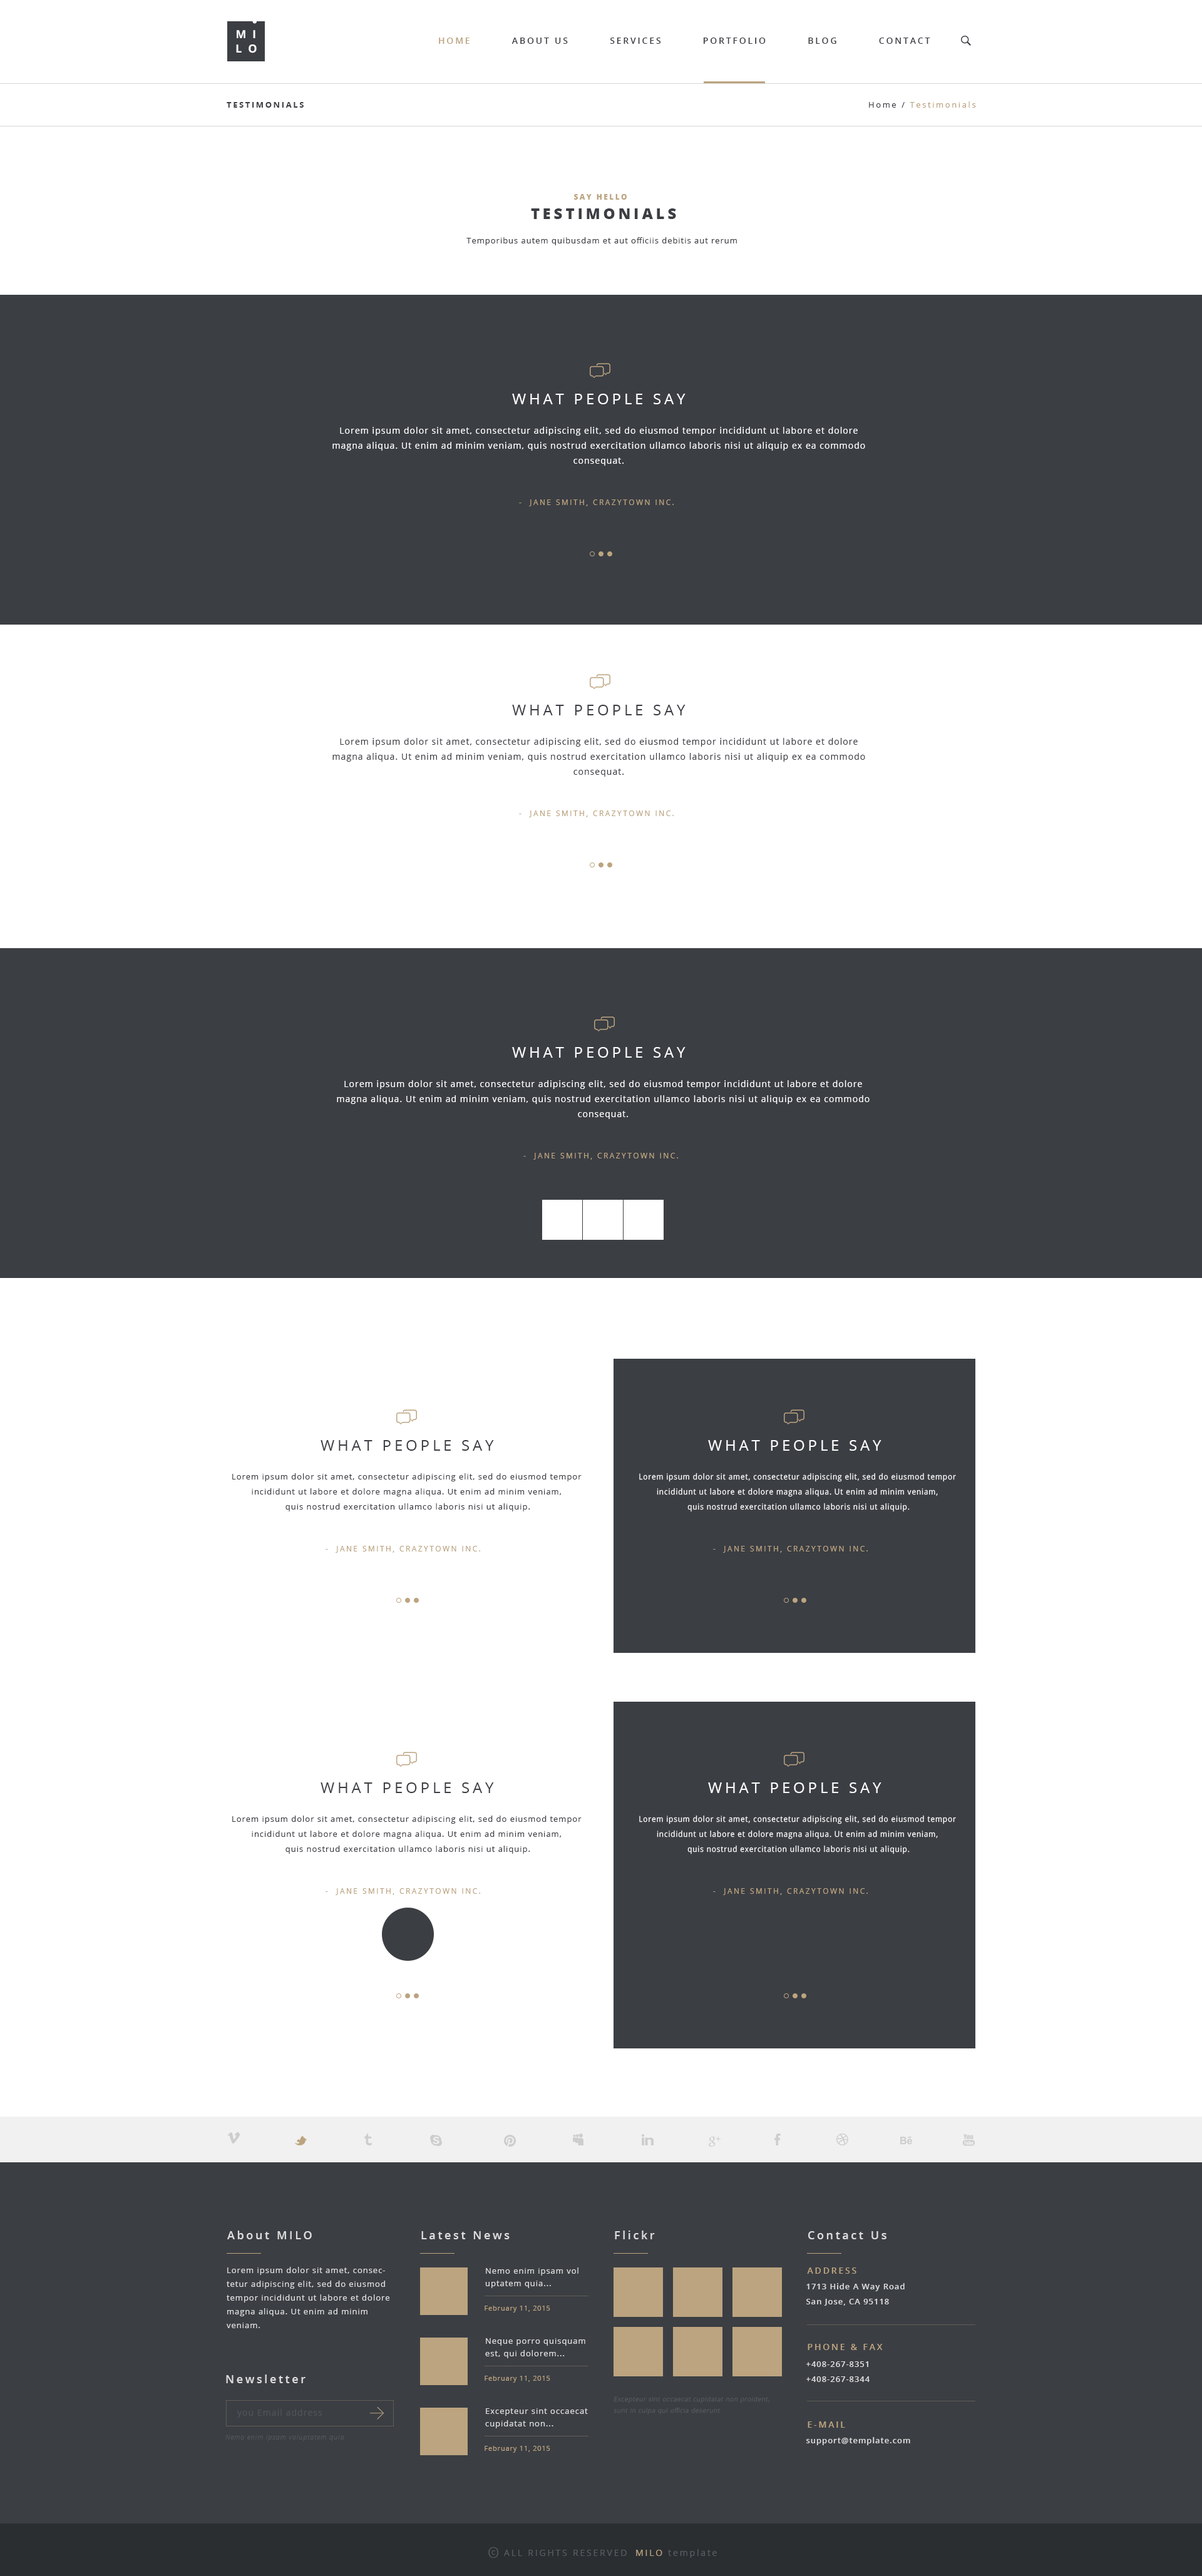
<style>
.page{position:relative;width:1202px;height:2576px;background:#ffffff}
.page>*{position:absolute;margin:0}
.t1{font:11.3px "OpenSans-Bold";letter-spacing:0.55em;color:#ffffff;text-transform:uppercase}
.t2{font:8.8px "OpenSans-Semibold";letter-spacing:0.2em;color:#3b3e43;text-transform:uppercase}
.t3{font:8.8px "OpenSans-Semibold";letter-spacing:0.2em;color:#bca480;text-transform:uppercase}
.t4{font:8.1px "OpenSans";letter-spacing:0.2em;color:#bca480}
.t5{font:8.1px "OpenSans";letter-spacing:0.2em;color:#3b3e43}
.t6{font:8.1px "OpenSans-Bold";letter-spacing:0.2em;color:#3b3e43;text-transform:uppercase}
.t7{font:7.5px "OpenSans-Extrabold";letter-spacing:0.2em;color:#bca480;text-transform:uppercase}
.t8{font:15px "OpenSans-Extrabold";letter-spacing:0.2em;color:#3b3e43;text-transform:uppercase}
.t9{font:8.1px "OpenSans";letter-spacing:0.075em;color:#3b3e43}
.t10{font:15px "OpenSans";letter-spacing:0.2em;color:#ffffff;text-transform:uppercase}
.t11{font:8.8px/15px "OpenSans";letter-spacing:0.075em;color:#ffffff}
.t12{font:7.5px "OpenSans";letter-spacing:0.2em;color:#bca480;text-transform:uppercase}
.t13{font:15px "OpenSans";letter-spacing:0.2em;color:#3b3e43;text-transform:uppercase}
.t14{font:8.8px/15px "OpenSans";letter-spacing:0.075em;color:#3b3e43}
.t15{font:8.1px/15px "OpenSans";letter-spacing:0.075em;color:#3b3e43}
.t16{font:8.1px/15px "OpenSans";letter-spacing:0.075em;color:#ffffff;scale:0.91 1}
.t17{font:11.3px "OpenSans-Semibold";letter-spacing:0.2em;color:#dddddd}
.t18{font:8.1px/13.8px "OpenSans";letter-spacing:0.075em;color:#dddddd}
.t19{font:8.1px/12.5px "OpenSans";letter-spacing:0.075em;color:#dddddd}
.t20{font:8.1px/15px "OpenSans-Semibold";letter-spacing:0.075em;color:#dddddd}
.t21{font:6.9px "OpenSans";letter-spacing:0.075em;color:#bca480}
.t22{font:6.3px/11.3px "OpenSans-Light";letter-spacing:0.075em;color:#585c62;font-style:italic}
.t23{font:8.8px "OpenSans";letter-spacing:0.075em;color:#505459}
.t24{font:6.9px "OpenSansLight-Italic";letter-spacing:0.075em;color:#53575d}
.t25{font:8.1px "OpenSans-Semibold";letter-spacing:0.075em;color:#dddddd}
.t26{font:15px "OpenSans-Light";letter-spacing:0.2em;color:#585c62;text-transform:uppercase}
.t27{font:8.8px "OpenSans";letter-spacing:0.2em;color:#585c62;text-transform:uppercase}
.t28{font:8.8px "OpenSans";letter-spacing:0.2em;color:#585c62}
.t29{font:8.8px "OpenSans";letter-spacing:0.2em;color:#bca480;text-transform:uppercase}
.t30{font:6.3px "OpenSans";letter-spacing:0.2em;color:#585c62;text-transform:uppercase}
</style>
<div class="page">
<p class="t1" style="left:237px;top:30px;width:18px;height:8px">mi</p>
<p class="t2" style="left:439px;top:38px;width:491px;height:6px"><span class="t3">Home          </span>About Us          Services          Portfolio          Blog          Contact</p>
<p class="t1" style="left:236px;top:44px;width:21px;height:9px">lo</p>
<p class="t4" style="left:869px;top:101px;width:107px;height:7px"><span class="t5">Home / </span>Testimonials</p>
<p class="t6" style="left:227px;top:102px;width:77px;height:6px">testimonials</p>
<p class="t7" style="left:574px;top:194px;width:52px;height:6px">say hello</p>
<p class="t8" style="left:531px;top:208px;width:145px;height:11px">testimonials</p>
<p class="t9" style="left:466px;top:237px;width:271px;height:8px">Temporibus autem quibusdam et aut officiis debitis aut rerum</p>
<p class="t10" style="left:512px;top:394px;width:173px;height:10px">What people say</p>
<p class="t11" style="left:332px;top:427px;width:533px;height:39px;text-align:center">Lorem ipsum dolor sit amet, consectetur adipiscing elit, sed do eiusmod tempor incididunt ut labore et dolore magna aliqua. Ut enim ad minim veniam, quis nostrud exercitation ullamco laboris nisi ut aliquip ex ea commodo consequat.</p>
<p class="t12" style="left:519px;top:499px;width:154px;height:7px">-  jane smith, crazytown inc.</p>
<p class="t13" style="left:512px;top:705px;width:173px;height:10px">What people say</p>
<p class="t14" style="left:332px;top:738px;width:533px;height:39px;text-align:center">Lorem ipsum dolor sit amet, consectetur adipiscing elit, sed do eiusmod tempor incididunt ut labore et dolore magna aliqua. Ut enim ad minim veniam, quis nostrud exercitation ullamco laboris nisi ut aliquip ex ea commodo consequat.</p>
<p class="t12" style="left:519px;top:810px;width:154px;height:7px">-  jane smith, crazytown inc.</p>
<p class="t10" style="left:512px;top:1047px;width:173px;height:11px">What people say</p>
<p class="t11" style="left:337px;top:1080px;width:532px;height:39px;text-align:center">Lorem ipsum dolor sit amet, consectetur adipiscing elit, sed do eiusmod tempor incididunt ut labore et dolore magna aliqua. Ut enim ad minim veniam, quis nostrud exercitation ullamco laboris nisi ut aliquip ex ea commodo consequat.</p>
<p class="t12" style="left:523px;top:1153px;width:155px;height:7px">-  jane smith, crazytown inc.</p>
<p class="t13" style="left:320px;top:1440px;width:174px;height:11px">What people say</p>
<p class="t10" style="left:708px;top:1440px;width:173px;height:11px">What people say</p>
<p class="t15" style="left:232px;top:1473px;width:349px;height:38px;text-align:center">Lorem ipsum dolor sit amet, consectetur adipiscing elit, sed do eiusmod tempor incididunt ut labore et dolore magna aliqua. Ut enim ad minim veniam,<br> quis nostrud exercitation ullamco laboris nisi ut aliquip.</p>
<p class="t16" style="left:639px;top:1473px;width:317px;height:39px;text-align:center">Lorem ipsum dolor sit amet, consectetur adipiscing elit, sed do eiusmod tempor incididunt ut labore et dolore magna aliqua. Ut enim ad minim veniam,<br> quis nostrud exercitation ullamco laboris nisi ut aliquip.</p>
<p class="t12" style="left:325px;top:1546px;width:155px;height:7px">-  jane smith, crazytown inc.</p>
<p class="t12" style="left:713px;top:1546px;width:154px;height:7px">-  jane smith, crazytown inc.</p>
<p class="t13" style="left:320px;top:1782px;width:174px;height:11px">What people say</p>
<p class="t10" style="left:708px;top:1782px;width:173px;height:11px">What people say</p>
<p class="t15" style="left:232px;top:1816px;width:349px;height:38px;text-align:center">Lorem ipsum dolor sit amet, consectetur adipiscing elit, sed do eiusmod tempor incididunt ut labore et dolore magna aliqua. Ut enim ad minim veniam,<br> quis nostrud exercitation ullamco laboris nisi ut aliquip.</p>
<p class="t16" style="left:639px;top:1815px;width:317px;height:39px;text-align:center">Lorem ipsum dolor sit amet, consectetur adipiscing elit, sed do eiusmod tempor incididunt ut labore et dolore magna aliqua. Ut enim ad minim veniam,<br> quis nostrud exercitation ullamco laboris nisi ut aliquip.</p>
<p class="t12" style="left:325px;top:1888px;width:155px;height:7px">-  jane smith, crazytown inc.</p>
<p class="t12" style="left:713px;top:1888px;width:154px;height:7px">-  jane smith, crazytown inc.</p>
<p class="t17" style="left:227px;top:2231px;width:85px;height:8px">About MILO</p>
<p class="t17" style="left:421px;top:2231px;width:88px;height:8px">Latest News</p>
<p class="t17" style="left:615px;top:2231px;width:40px;height:8px">Flickr</p>
<p class="t17" style="left:807px;top:2231px;width:79px;height:8px">Contact Us</p>
<p class="t18" style="left:227px;top:2267px;width:162px;height:61px">Lorem ipsum dolor sit amet, consectetur adipiscing elit, sed do eiusmod tempor incididunt ut labore et dolore magna aliqua. Ut enim ad minim veniam.</p>
<p class="t19" style="left:485px;top:2267px;width:93px;height:21px">Nemo enim ipsam vol uptatem quia...</p>
<p class="t3" style="left:807px;top:2267px;width:49px;height:7px">Address</p>
<p class="t20" style="left:806px;top:2283px;width:98px;height:23px">1713 Hide A Way Road<br>San Jose, CA 95118</p>
<p class="t21" style="left:484px;top:2306px;width:66px;height:7px">February 11, 2015</p>
<p class="t19" style="left:485px;top:2338px;width:100px;height:20px">Neque porro quisquam est, qui dolorem...</p>
<p class="t3" style="left:807px;top:2344px;width:75px;height:6px">Phone &amp; Fax</p>
<p class="t20" style="left:806px;top:2361px;width:63px;height:21px">+408-267-8351<br>+408-267-8344</p>
<p class="t17" style="left:226px;top:2374px;width:79px;height:9px">Newsletter</p>
<p class="t21" style="left:484px;top:2376px;width:66px;height:7px">February 11, 2015</p>
<p class="t22" style="left:613px;top:2396px;width:156px;height:19px">Excepteur sint occaecat cupidatat non proident, sunt in culpa qui officia deserunt</p>
<p class="t23" style="left:237px;top:2409px;width:85px;height:9px">you Email address</p>
<p class="t19" style="left:485px;top:2408px;width:103px;height:20px">Excepteur sint occaecat cupidatat non...</p>
<p class="t3" style="left:807px;top:2421px;width:38px;height:7px">E-mail</p>
<p class="t24" style="left:225px;top:2435px;width:119px;height:6px">Nemo enim ipsam voluptatem quia</p>
<p class="t25" style="left:806px;top:2437px;width:104px;height:8px">support@template.com</p>
<p class="t21" style="left:484px;top:2446px;width:66px;height:7px">February 11, 2015</p>
<p class="t26" style="left:488px;top:2547px;width:10px;height:11px">O</p>
<p class="t27" style="left:504px;top:2550px;width:122px;height:6px">All Rights Reserved</p>
<p class="t28" style="left:636px;top:2549px;width:81px;height:9px"><span class="t29">MILO </span>template</p>
<p class="t30" style="left:491px;top:2550px;width:4px;height:5px">c</p>
</div>
